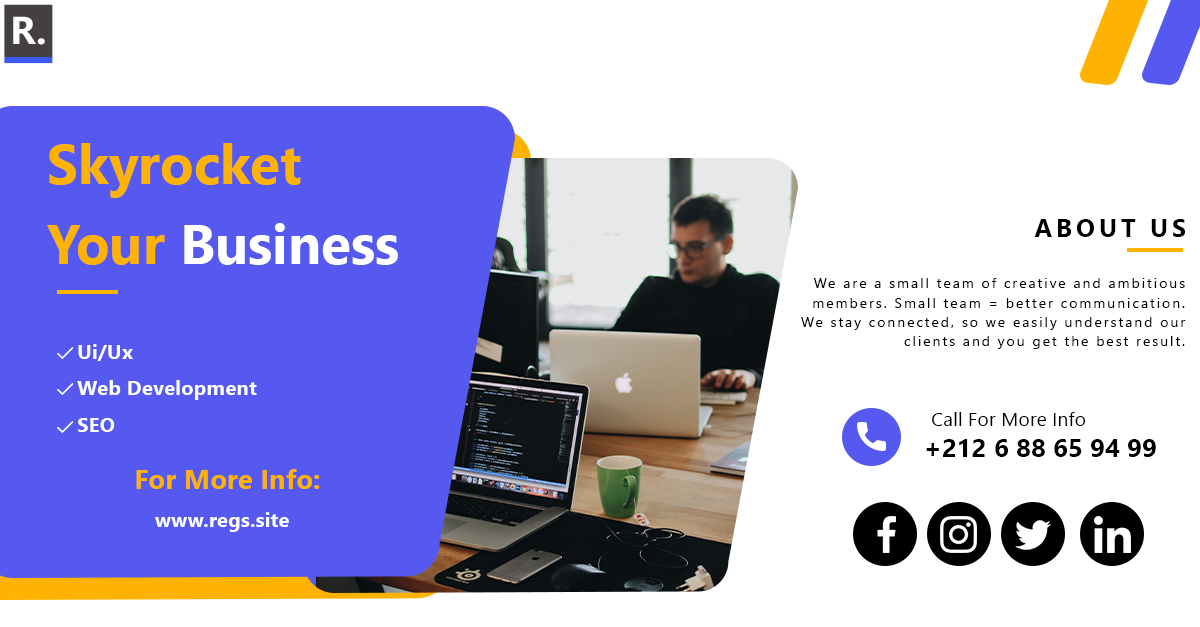
<style>
.page{position:relative;width:1200px;height:627px;background:#ffffff}
.page>*{position:absolute;margin:0}
.t1{font:54.7px/79.7px "SegoeUI-Bold";letter-spacing:0.003em;color:#feb202}
.t2{font:54.7px/79.7px "SegoeUI-Bold";letter-spacing:0.003em;color:#ffffff}
.t3{font:25.4px "SegoeUI-Bold";letter-spacing:0.143em;color:#000000}
.t4{font:13.9px/19.3px "SegoeUI";letter-spacing:0.143em;color:#000000}
.t5{font:20.5px "SegoeUI-Bold";letter-spacing:0.003em;color:#ffffff}
.t6{font:19.4px "SegoeUI";letter-spacing:0.003em;color:#000000}
.t7{font:25.8px "SegoeUI-Bold";letter-spacing:0.003em;color:#000000}
.t8{font:27.3px "SegoeUI-Bold";letter-spacing:0.003em;color:#feb202}
</style>
<div class="page">
<p class="t1" style="left:47px;top:143px;width:351px;height:122px;text-align:right">Skyrocket<br>Your <span class="t2">Business</span></p>
<p class="t3" style="left:1034px;top:219px;width:152px;height:18px">ABOUT US</p>
<p class="t4" style="left:801px;top:278px;width:385px;height:71px">We are a small team of creative and ambitious members. Small team = better communication. We stay connected, so we easily understand our clients and you get the best result.</p>
<p class="t5" style="left:78px;top:344px;width:55px;height:17px">Ui/Ux</p>
<p class="t5" style="left:77px;top:380px;width:180px;height:20px">Web Development</p>
<p class="t6" style="left:932px;top:412px;width:154px;height:14px">Call For More Info</p>
<p class="t5" style="left:78px;top:418px;width:37px;height:14px">SEO</p>
<p class="t7" style="left:926px;top:439px;width:230px;height:18px">+212 6 88 65 94 99</p>
<p class="t8" style="left:136px;top:469px;width:184px;height:20px">For More Info:</p>
<p class="t5" style="left:155px;top:512px;width:134px;height:20px">www.regs.site</p>
</div>
